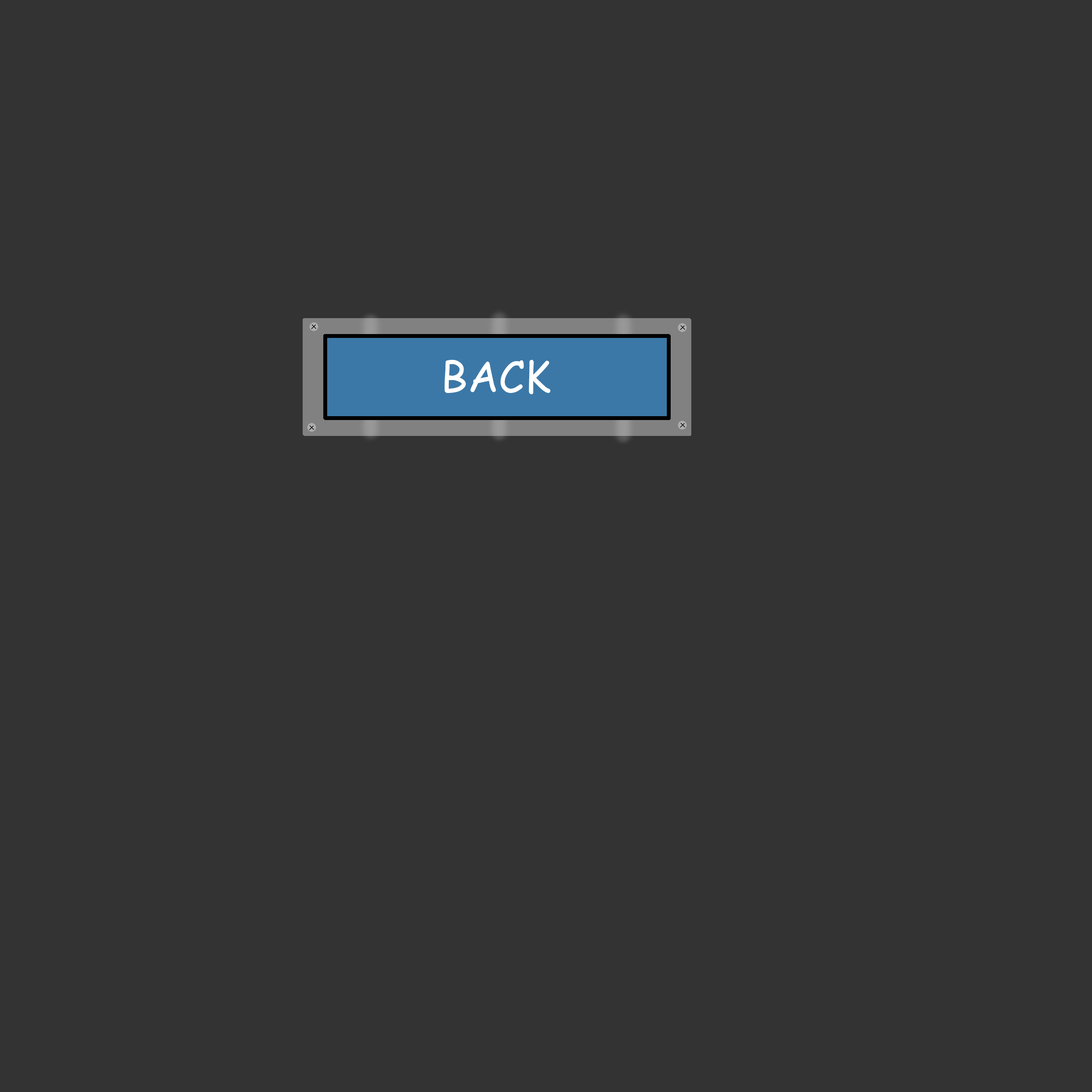
<style>
.page{position:relative;width:1092px;height:1092px;background:#333333}
.page>*{position:absolute;margin:0}
.t1{font:42.6px "ComicSansMS";color:#ffffff}
</style>
<div class="page">
<p class="t1" style="left:445px;top:360px;width:106px;height:34px">BACK</p>
</div>
